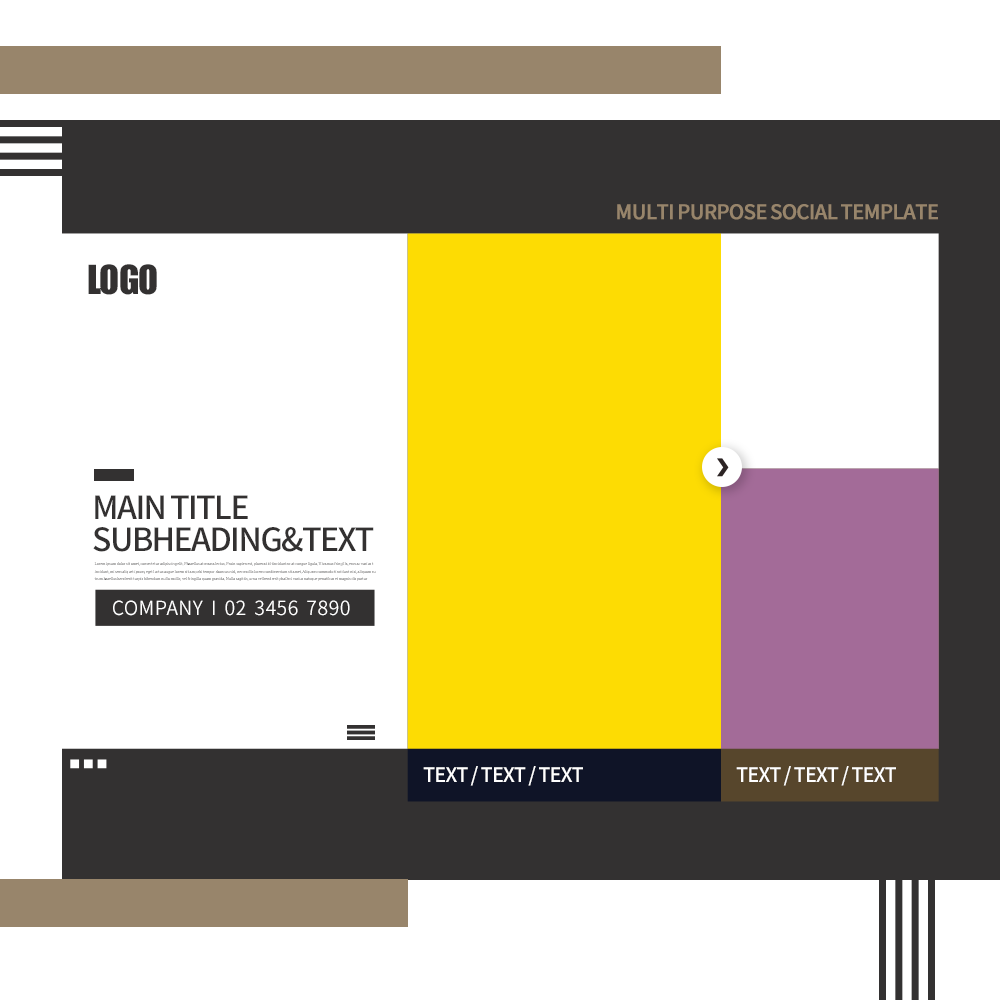
<style>
.page{position:relative;width:1000px;height:1000px;background:#ffffff}
.page>*{position:absolute;margin:0}
.t1{font:20px "SourceHanSansKR-Medium";letter-spacing:-0.05em;color:#98856b;font-weight:bold}
.t2{font:37px "Impact";letter-spacing:-0.025em;color:#333131}
.t3{font:32px "SourceHanSansKR-Medium";letter-spacing:-0.05em;color:#333131;text-transform:uppercase}
.t4{font:4.2px/7.4px "IropkeBatangM";letter-spacing:-0.04em}
.t5{font:19.5px "SourceHanSansKR-Normal";letter-spacing:0.02em;color:#ffffff;text-transform:uppercase}
.t6{font:20px "SourceHanSansKR-Medium";letter-spacing:-0.04em;color:#ffffff}
</style>
<div class="page">
<p class="t1" style="left:617px;top:204px;width:321px;height:16px">MULTI PURPOSE SOCIAL TEMPLATE</p>
<p class="t2" style="left:88px;top:264px;width:69px;height:31px">LOGO</p>
<p class="t3" style="left:95px;top:495px;width:153px;height:24px">MAIN TITLE</p>
<p class="t3" style="left:93px;top:527px;width:281px;height:25px">SUBHEADING&amp;TEXT</p>
<p class="t4" style="left:94px;top:562px;width:282px;height:19px">Lorem ipsum dolor sit amet, consectetur adipiscing elit. Phasellus at massa lectus. Proin sapien est, placerat id tinciduntnc at congue ligula. Vivamus fringilla, eros ac varius t<br>incidunt, mi sem aliquet ipsum, eget luctus augue lorem sit am.orbi tempor rhoncus nisl, nec mollis lorem condimentum sit amet. Aliquam commodo tincidunt nisi, aliquam ru<br>trum hasellus hendrerit turpis bibendum nulla mollis, vel fringilla quam gravida. Nulla sagittis, urna vel hendrerit phaOrci varius natoque penatibus et magnis dis partur</p>
<p class="t5" style="left:113px;top:600px;width:237px;height:16px">COMPANY  I  02  3456  7890</p>
<p class="t6" style="left:423px;top:766px;width:160px;height:20px">TEXT / TEXT / TEXT</p>
<p class="t6" style="left:736px;top:766px;width:160px;height:20px">TEXT / TEXT / TEXT</p>
</div>
